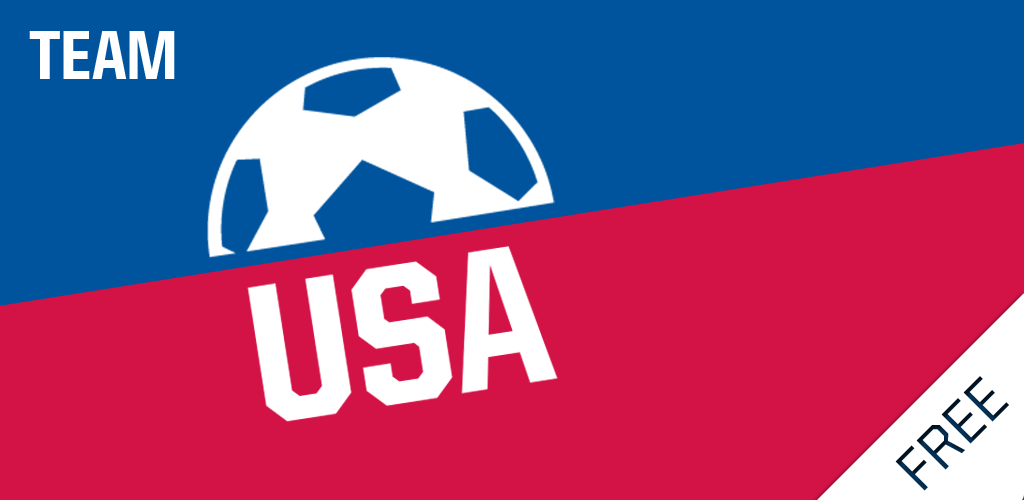
<style>
.page{position:relative;width:1024px;height:500px;background:#d31346}
.page>*{position:absolute;margin:0}
.t1{font:70px "UnitedSansSemiCond-Heavy";color:#ffffff}
.t2{font:200px "UnitedSansSemiCond-Heavy";color:#ffffff}
.t3{font:59.3px "UnitedSansReg-Medium"}
</style>
<div class="page">
<p class="t1" style="left:29px;top:31px;width:146px;height:48px">TEAM</p>
<p class="t2" style="left:247px;top:245px;width:311px;height:177px;rotate:-9deg">USA</p>
<p class="t3" style="left:895px;top:376px;width:114px;height:115px;rotate:-45deg">FREE</p>
</div>
